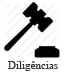
<style>
.page{position:relative;width:64px;height:74px;background:#ffffff}
.page>*{position:absolute;margin:0}
.t1{font:11px "TimesNewRomanPSMT";color:#333333}
</style>
<div class="page">
<p class="t1" style="left:8px;top:61px;width:50px;height:10px">Diligências</p>
</div>
